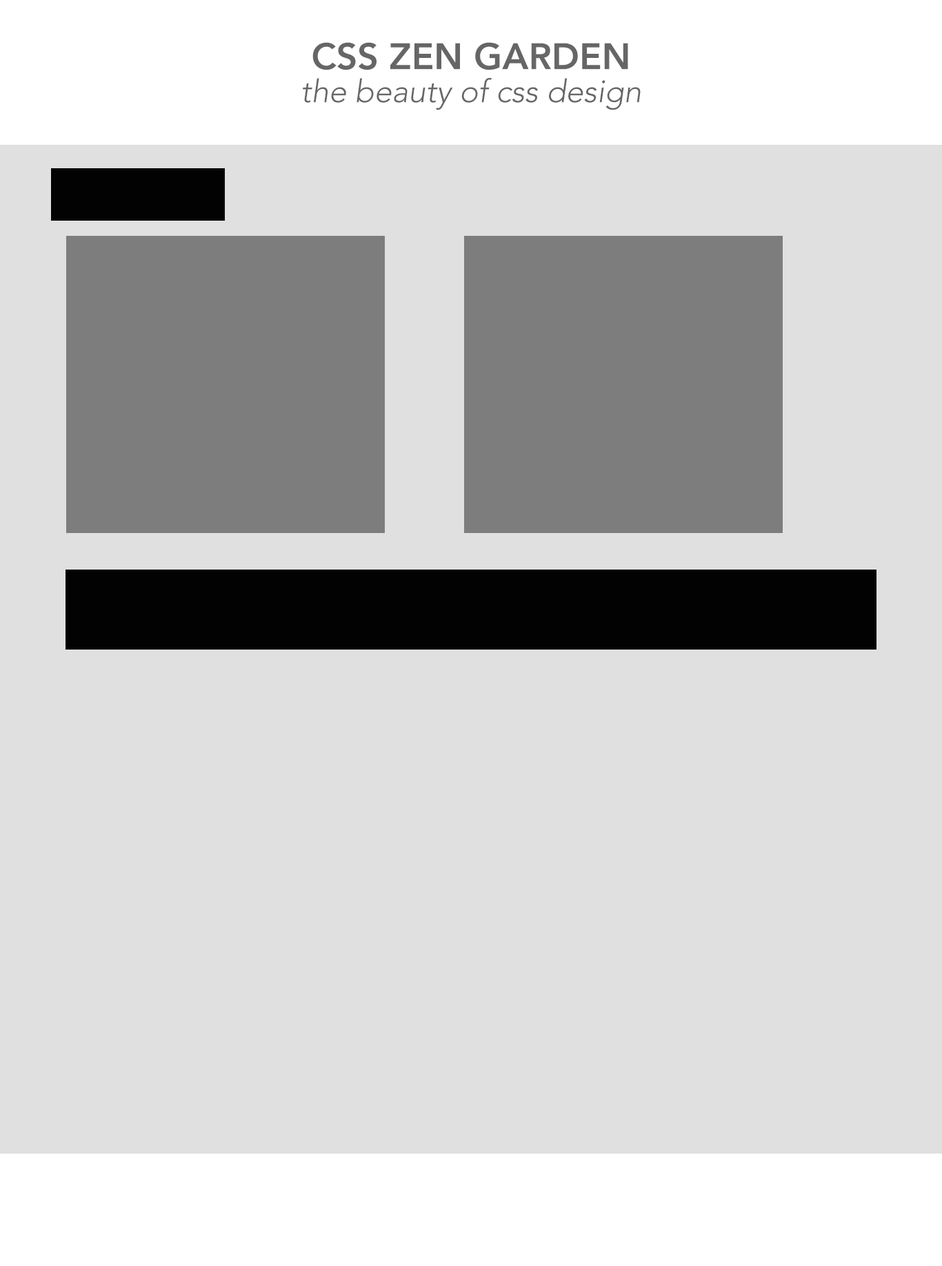
<style>
.page{position:relative;width:942px;height:1266px;background:#e0e0e0}
.page>*{position:absolute;margin:0}
.t1{font:36.5px "Avenir-Heavy";color:#666666}
.t2{font:31.7px "Avenir-LightOblique";color:#666666}
</style>
<div class="page">
<p class="t1" style="left:312px;top:42px;width:316px;height:28px">CSS ZEN GARDEN</p>
<p class="t2" style="left:303px;top:78px;width:338px;height:32px">the beauty of css design</p>
</div>
